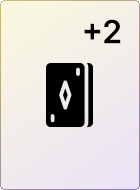
<style>
.page{position:relative;width:140px;height:190px}
.page>*{position:absolute;margin:0}
.t1{font:32px "Inter-SemiBold";color:#000000}
</style>
<div class="page">
<p class="t1" style="left:84px;top:19px;width:37px;height:25px">+2</p>
</div>
